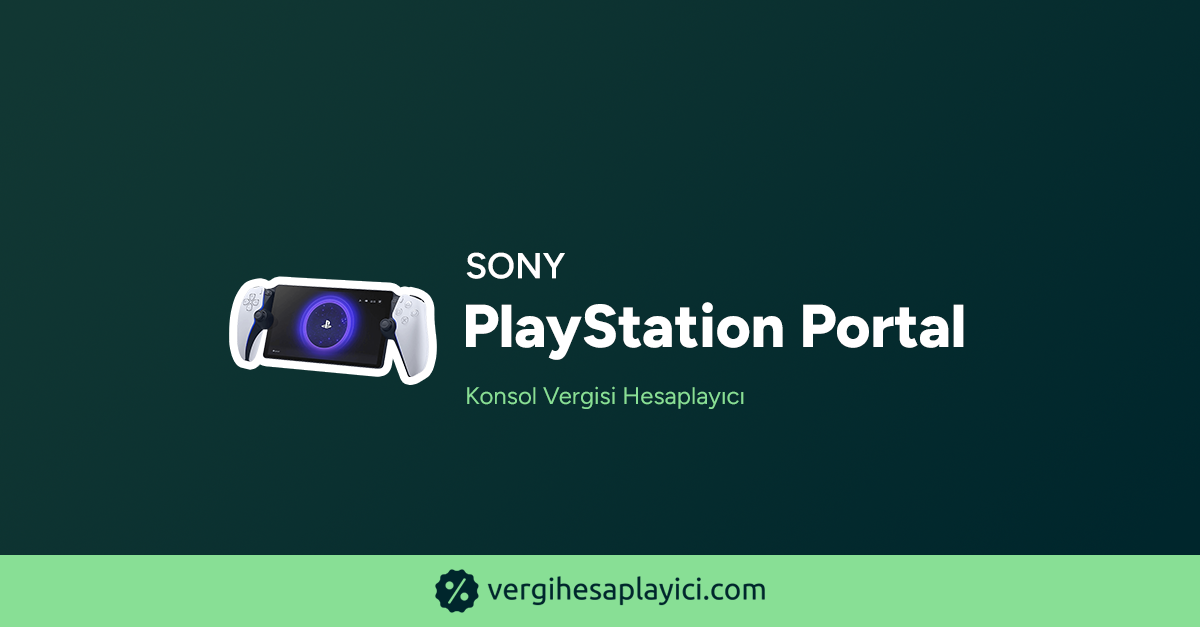
<style>
.page{position:relative;width:1200px;height:627px}
.page>*{position:absolute;margin:0}
.t1{font:36px "Figtree-SemiBold";color:#ffffff;text-transform:uppercase;font-weight:bold}
.t2{font:60.3px "Figtree-ExtraBold";color:#ffffff;font-weight:bold}
.t3{font:24px "Figtree-Regular";color:#88df95;font-weight:bold}
</style>
<div class="page">
<p class="t1" style="left:466px;top:252px;width:99px;height:27px">SONY</p>
<p class="t2" style="left:466px;top:302px;width:498px;height:58px">PlayStation Portal</p>
<p class="t3" style="left:467px;top:386px;width:277px;height:23px">Konsol Vergisi Hesaplayıcı</p>
</div>
